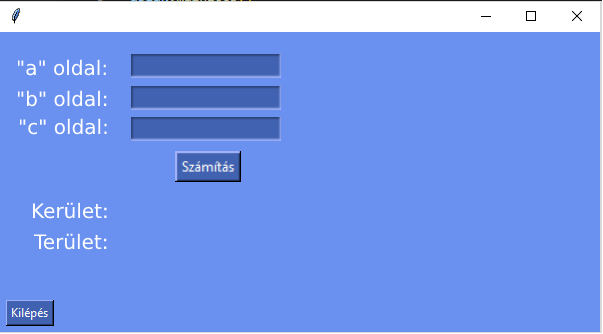
<style>
.page{position:relative;width:603px;height:334px;background:#6a91ef}
.page>*{position:absolute;margin:0}
.t1{font:20px "DejaVuSans";color:#ffffff}
</style>
<div class="page">
<p class="t1" style="left:17px;top:59px;width:89px;height:17px">"a" oldal:</p>
<p class="t1" style="left:17px;top:90px;width:90px;height:17px">"b" oldal:</p>
<p class="t1" style="left:19px;top:118px;width:88px;height:17px">"c" oldal:</p>
<p class="t1" style="left:32px;top:202px;width:75px;height:17px">Kerület:</p>
<p class="t1" style="left:33px;top:233px;width:74px;height:17px">Terület:</p>
</div>
